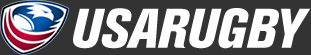
<style>
.page{position:relative;width:311px;height:55px;background:#333333}
.page>*{position:absolute;margin:0}
.t1{font:55.2px "AkzidenzGroteskBE-XBdCnIt";letter-spacing:-0.01em;color:#ffffff;text-transform:uppercase}
</style>
<div class="page">
<p class="t1" style="left:73px;top:8px;width:238px;height:41px">USARUGBY</p>
</div>
